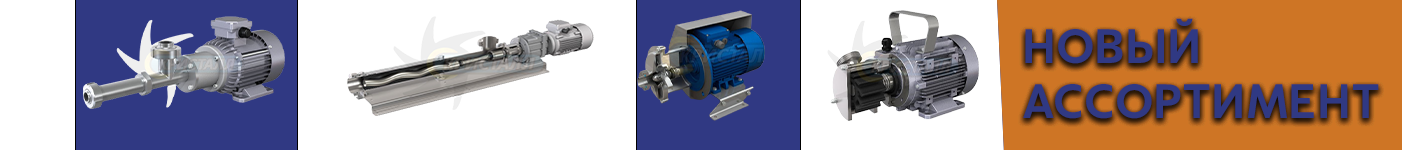
<style>
.page{position:relative;width:1402px;height:150px;background:#ffffff}
.page>*{position:absolute;margin:0}
.t1{font:45.8px "CapturaNow-Medium";color:#303983;text-transform:uppercase}
</style>
<div class="page">
<p class="t1" style="left:1023px;top:18px;width:356px;height:101px">новый <br>ассортимент</p>
</div>
